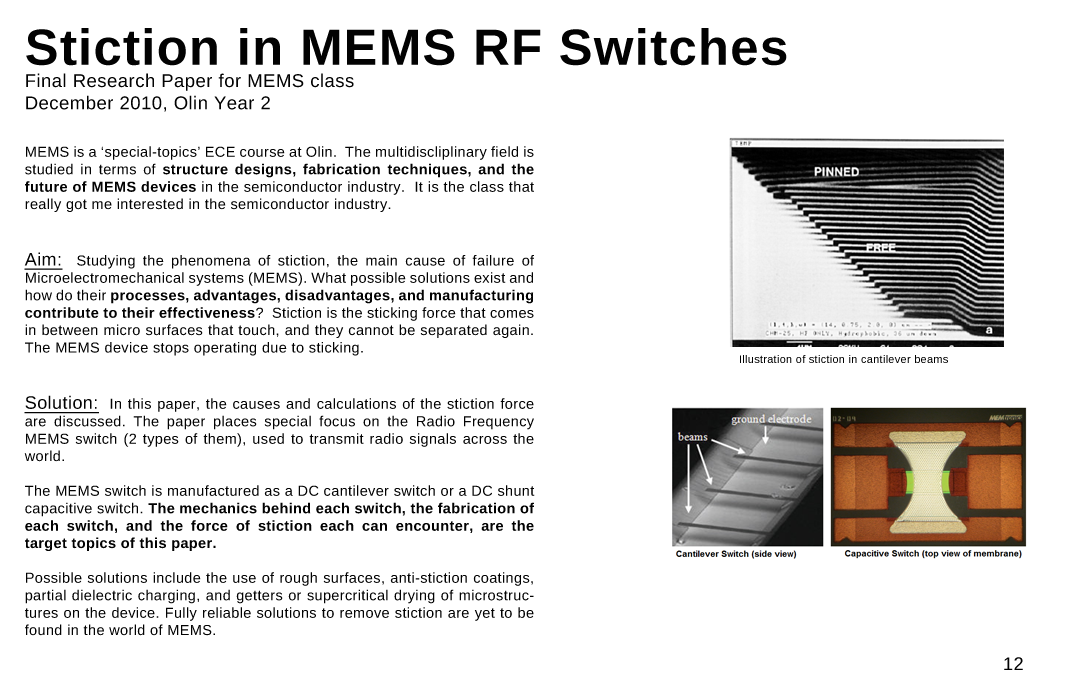
<style>
.page{position:relative;width:1080px;height:699px;background:#ffffff}
.page>*{position:absolute;margin:0}
.t1{font:18.5px "LiberationSans";letter-spacing:0.025em;color:#020202}
.t2{font:50.9px "LiberationSans-Bold";letter-spacing:0.025em;color:#020202}
.t3{font:14.5px "LiberationSans";letter-spacing:0.025em;color:#020202}
.t4{font:14.5px "LiberationSans-Bold";letter-spacing:0.025em;color:#020202}
.t5{font:18px "LiberationSans";letter-spacing:0.025em;color:#020202;text-decoration:underline}
.t6{font:11px "LiberationSans";letter-spacing:0.025em;color:#020202}
.t7{font:18px "LiberationSans";letter-spacing:0.025em;color:#020202}
</style>
<div class="page">
<p class="t1" style="left:26px;top:28px;width:761px;height:84px;text-align:justify"><span class="t2">Stiction in MEMS RF Switches<br></span>Final Research Paper for MEMS class<br>December 2010, Olin Year 2</p>
<p class="t3" style="left:24px;top:146px;width:511px;height:490px;text-align:justify">MEMS is a ‘special-topics’ ECE course at Olin.  The multidiscliplinary field is studied in terms of <span class="t4">structure designs, fabrication techniques, and the future of MEMS devices</span> in the semiconductor industry.  It is the class that really got me interested in the semiconductor industry.<br><br><br><span class="t5">Aim:</span>  Studying the phenomena of stiction, the main cause of failure of Microelectromechanical systems (MEMS). What possible solutions exist and how do their <span class="t4">processes, advantages, disadvantages, and manufacturing contribute to their effectiveness</span>?  Stiction is the sticking force that comes in between micro surfaces that touch, and they cannot be separated again.  The MEMS device stops operating due to sticking.<br><br><br><span class="t5">Solution:</span>  In this paper, the causes and calculations of the stiction force are discussed. The paper places special focus on the Radio Frequency MEMS switch (2 types of them), used to transmit radio signals across the world. <br><br>The MEMS switch is manufactured as a DC cantilever switch or a DC shunt capacitive switch. <span class="t4">The mechanics behind each switch, the fabrication of each switch, and the force of stiction each can encounter, are the target topics of this paper. <br><br></span>Possible solutions include the use of rough surfaces, anti-stiction coatings, partial dielectric charging, and getters or supercritical drying of microstructures on the device. Fully reliable solutions to remove stiction are yet to be found in the world of MEMS.</p>
<p class="t6" style="left:740px;top:355px;width:208px;height:8px">Illustration of stiction in cantilever beams</p>
<p class="t7" style="left:1004px;top:657px;width:19px;height:13px">12</p>
</div>
